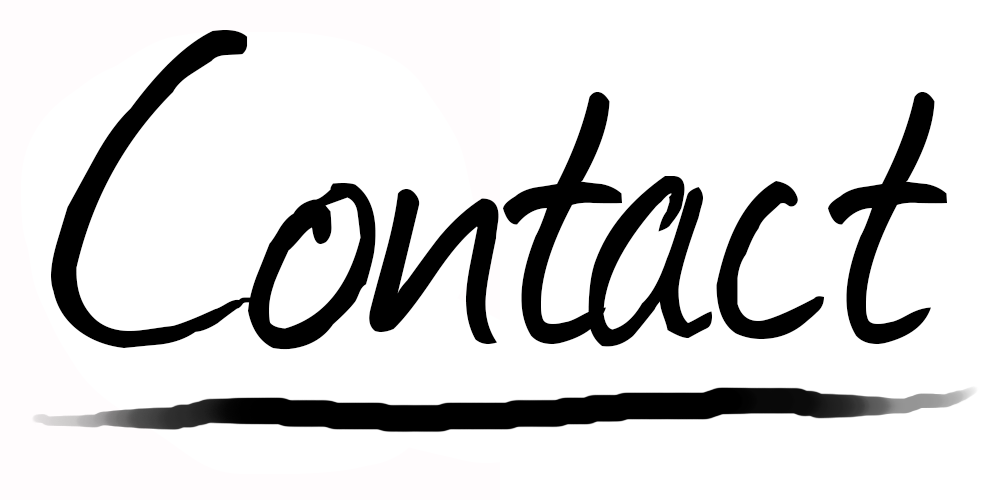
<style>
.page{position:relative;width:996px;height:500px;background:#ffffff}
.page>*{position:absolute;margin:0}
.t1{font:500px "Journal";color:#000000}
</style>
<div class="page">
<p class="t1" style="left:51px;top:30px;width:896px;height:320px">Contact</p>
</div>
